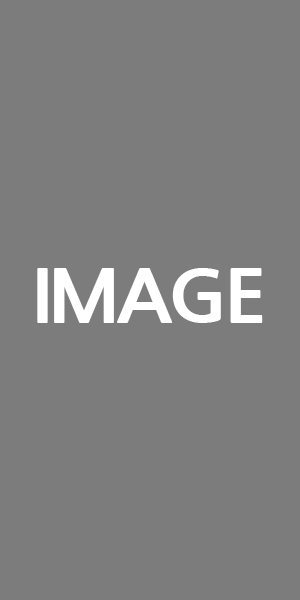
<style>
.page{position:relative;width:300px;height:600px;background:#7c7c7c}
.page>*{position:absolute;margin:0}
.t1{font:75px "NanumGothicExtraBold";letter-spacing:-0.05em;color:#ffffff;text-transform:uppercase}
</style>
<div class="page">
<p class="t1" style="left:37px;top:268px;width:226px;height:55px">IMAGE</p>
</div>
